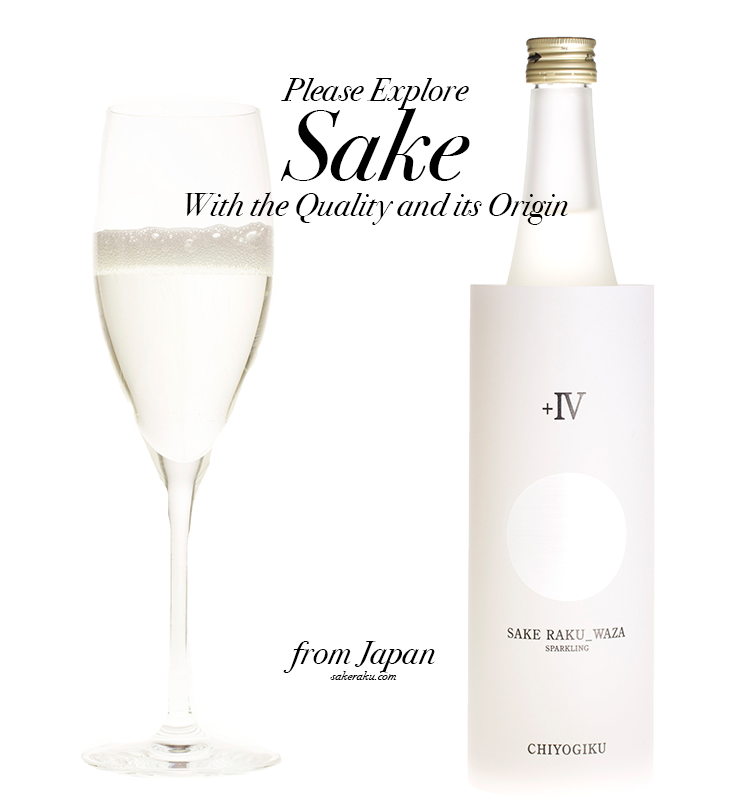
<style>
.page{position:relative;width:750px;height:800px;background:#ffffff}
.page>*{position:absolute;margin:0}
.t1{font:33.3px "BodoniSvtyTwoOSITCTT-BookIt";color:#000000}
.t2{font:100px "BodoniSvtyTwoOSITCTT-BookIt";color:#000000}
.t3{font:12.5px "BodoniSvtyTwoOSITCTT-BookIt";color:#000000}
</style>
<div class="page">
<p class="t1" style="left:281px;top:78px;width:188px;height:32px">Please Explore</p>
<p class="t2" style="left:280px;top:108px;width:190px;height:73px">Sake</p>
<p class="t1" style="left:185px;top:192px;width:383px;height:33px">With the Quality and its Origin</p>
<p class="t1" style="left:283px;top:641px;width:152px;height:32px">from Japan</p>
<p class="t3" style="left:330px;top:671px;width:67px;height:9px">sakeraku.com</p>
</div>
